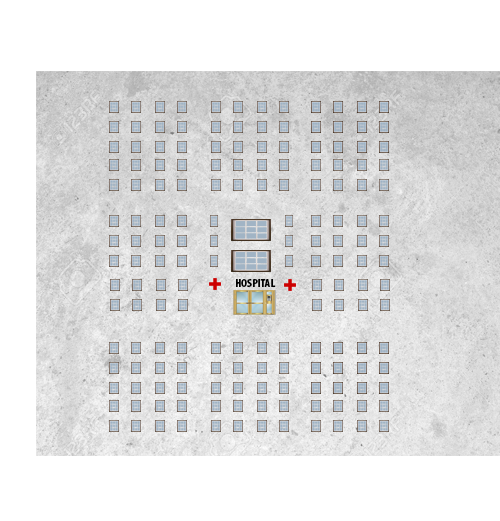
<style>
.page{position:relative;width:500px;height:521px;background:#ffffff}
.page>*{position:absolute;margin:0}
.t1{font:12px "MyriadPro-BoldCond";color:#000000}
</style>
<div class="page">
<p class="t1" style="left:236px;top:279px;width:40px;height:8px">HOSPITAL</p>
</div>
